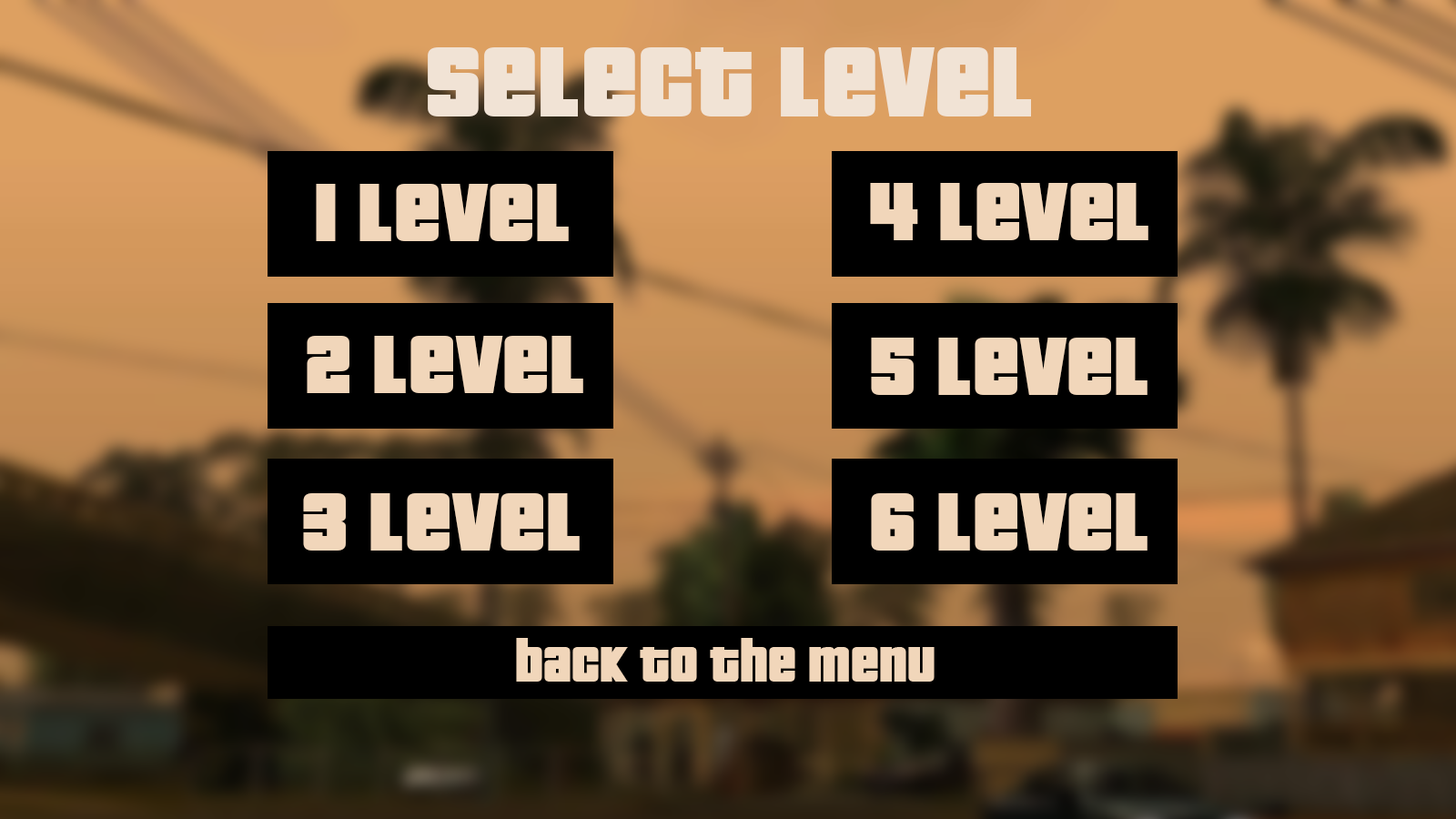
<style>
.page{position:relative;width:1456px;height:819px}
.page>*{position:absolute;margin:0}
.t1{font:136.5px "PricedownRus";color:#f1e3d5}
.t2{font:113.7px "PricedownRus";color:#f1d6ba}
.t3{font:68.2px "PricedownRus";color:#f1d6ba}
</style>
<div class="page">
<p class="t1" style="left:428px;top:47px;width:603px;height:69px">select level</p>
<p class="t2" style="left:316px;top:184px;width:253px;height:57px">1 level</p>
<p class="t2" style="left:870px;top:183px;width:278px;height:57px">4 level</p>
<p class="t2" style="left:307px;top:336px;width:276px;height:57px">2 level</p>
<p class="t2" style="left:871px;top:338px;width:276px;height:57px">5 level</p>
<p class="t2" style="left:303px;top:493px;width:277px;height:58px">3 level</p>
<p class="t2" style="left:871px;top:493px;width:276px;height:58px">6 level</p>
<p class="t3" style="left:516px;top:638px;width:419px;height:44px">back to the menu</p>
</div>
